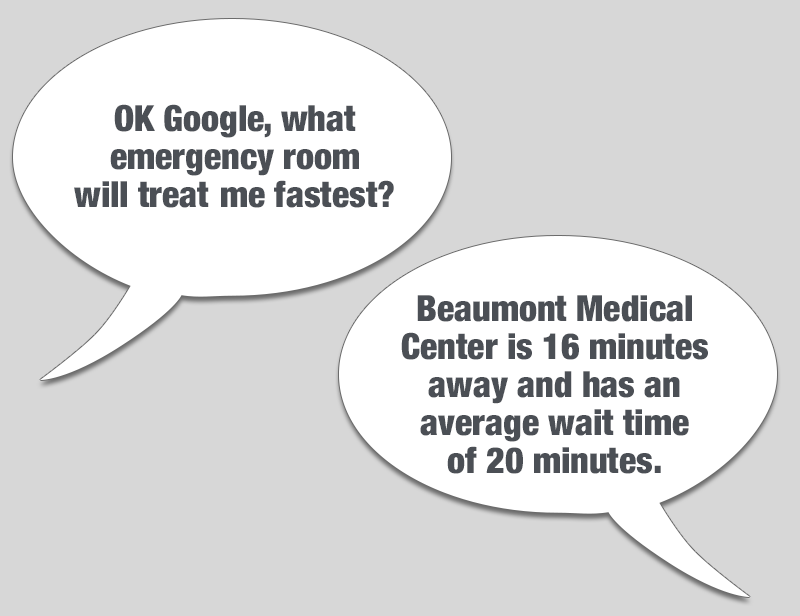
<style>
.page{position:relative;width:800px;height:616px;background:#d7d7d7}
.page>*{position:absolute;margin:0}
.t1{font:36px/38px "HelveticaNeue-CondensedBlack";color:#4b4f55}
</style>
<div class="page">
<p class="t1" style="left:74px;top:104px;width:320px;height:104px;text-align:center">OK Google, what<br>emergency room<br>will treat me fastest?</p>
<p class="t1" style="left:401px;top:295px;width:307px;height:179px;text-align:center">Beaumont Medical<br>Center is 16 minutes<br>away and has an<br>average wait time<br>of 20 minutes.</p>
</div>
